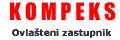
<style>
.page{position:relative;width:120px;height:40px;background:#ffffff}
.page>*{position:absolute;margin:0}
.t1{font:22px "Impact";color:#ff0000}
.t2{font:9px "Verdana-Bold";color:#2d343e}
</style>
<div class="page">
<p class="t1" style="left:10px;top:2px;width:106px;height:19px">K O M P E K S</p>
<p class="t2" style="left:12px;top:28px;width:100px;height:10px">Ovlašteni zastupnik</p>
</div>
